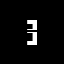
<style>
.page{position:relative;width:64px;height:64px;background:#000000}
.page>*{position:absolute;margin:0}
.t1{font:30px "SCIFIBOX";color:#ffffff}
</style>
<div class="page">
<p class="t1" style="left:27px;top:20px;width:10px;height:25px">3</p>
</div>
